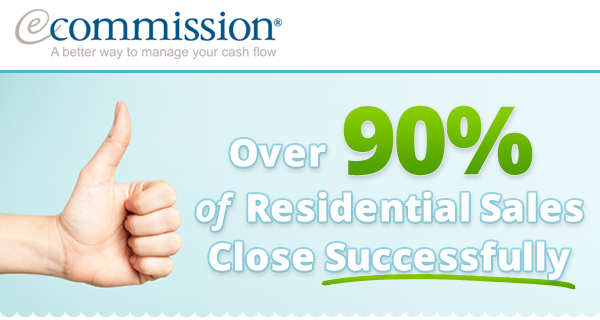
<style>
.page{position:relative;width:600px;height:320px;background:#ffffff}
.page>*{position:absolute;margin:0}
.t1{font:94.6px "OpenSans-Extrabold";text-transform:uppercase}
.t2{font:37.9px "OpenSans-Extrabold";color:#ffffff}
.t3{font:37.9px "OpenSans-BoldItalic";color:#ffffff}
</style>
<div class="page">
<p class="t1" style="left:343px;top:105px;width:190px;height:71px">90%</p>
<p class="t2" style="left:230px;top:139px;width:96px;height:28px">Over</p>
<p class="t2" style="left:196px;top:192px;width:387px;height:39px"><span class="t3">of</span>  Residential Sales</p>
<p class="t2" style="left:209px;top:241px;width:362px;height:39px">Close Successfully</p>
</div>
